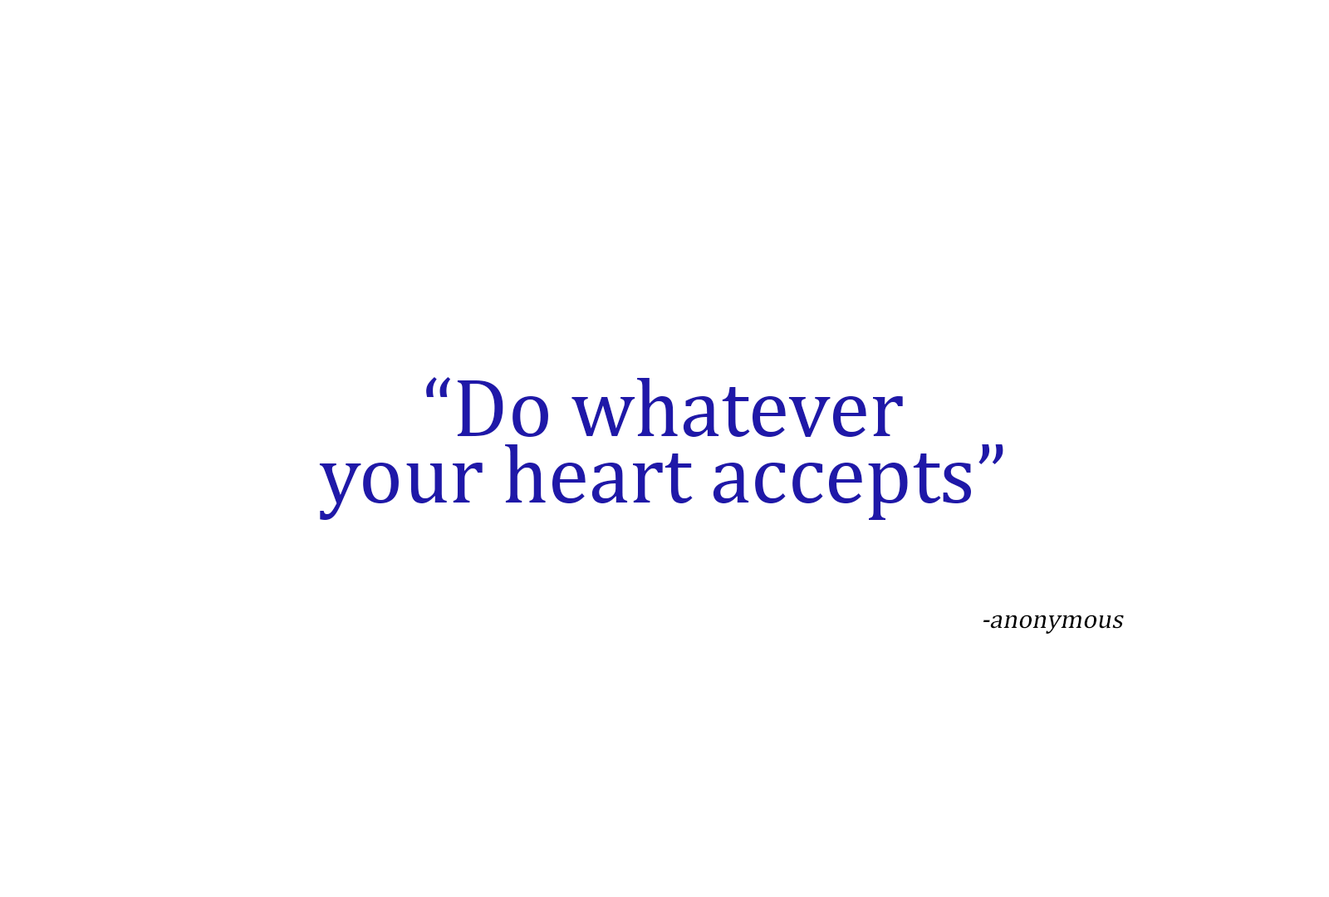
<style>
.page{position:relative;width:1329px;height:897px;background:#ffffff}
.page>*{position:absolute;margin:0}
.t1{font:83.3px "Cambria";color:#1f18a8}
.t2{font:26.8px "Cambria";color:#000000;font-style:italic}
</style>
<div class="page">
<p class="t1" style="left:426px;top:377px;width:477px;height:60px">“Do whatever</p>
<p class="t1" style="left:319px;top:444px;width:684px;height:76px">your heart accepts”</p>
<p class="t2" style="left:984px;top:615px;width:140px;height:19px">-anonymous</p>
</div>
